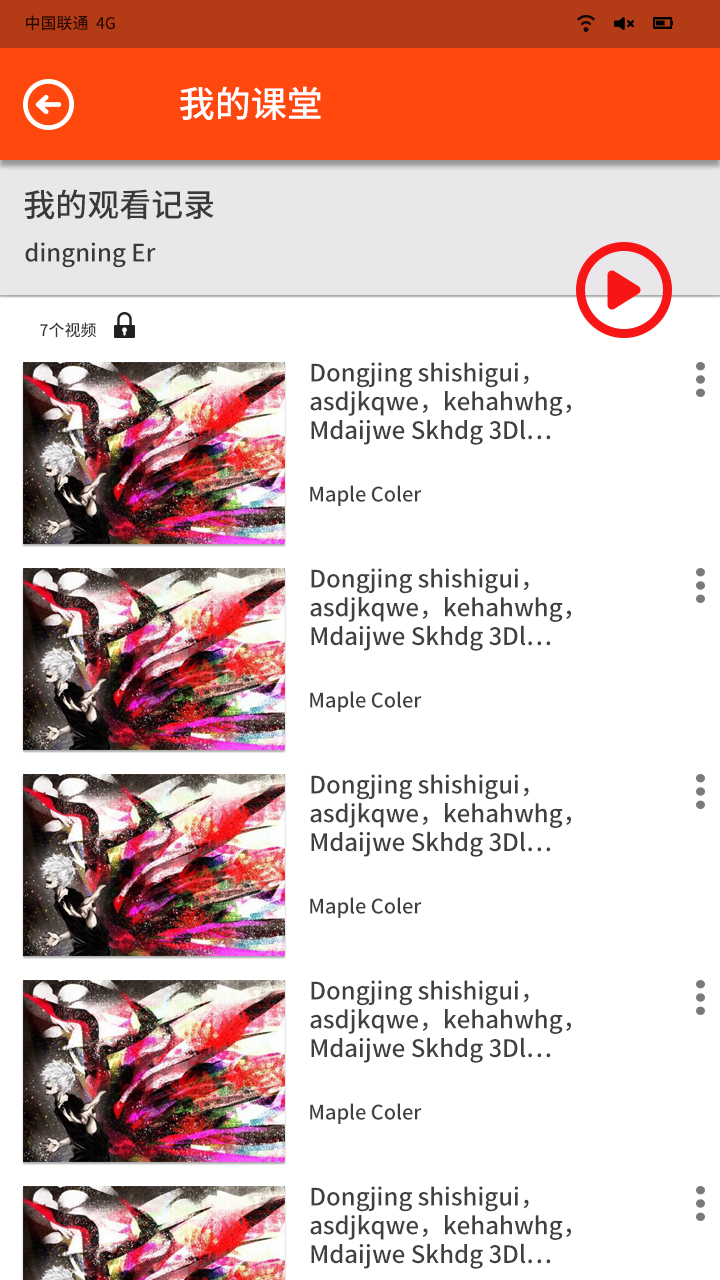
<style>
.page{position:relative;width:720px;height:1280px;background:#ffffff}
.page>*{position:absolute;margin:0}
.t1{font:16px "SourceHanSansCN-Medium";color:#2a0802}
.t2{font:36px "SourceHanSansCN-Medium";color:#ffffff}
.t3{font:32px "SourceHanSansCN-Medium";color:#3a393a}
.t4{font:24px "SourceHanSansCN-Medium";color:#3a393a}
.t5{font:16px "SourceHanSansCN-Medium";color:#373737}
.t6{font:24px "SourceHanSansCN-Medium";color:#404040}
.t7{font:20px "SourceHanSansCN-Medium";color:#404040}
</style>
<div class="page">
<p class="t1" style="left:26px;top:15px;width:89px;height:16px">中国联通  4G</p>
<p class="t2" style="left:180px;top:86px;width:141px;height:34px">我的课堂</p>
<p class="t3" style="left:24px;top:189px;width:190px;height:31px">我的观看记录</p>
<p class="t4" style="left:25px;top:242px;width:131px;height:26px">dingning Er</p>
<p class="t5" style="left:40px;top:322px;width:56px;height:16px">7个视频</p>
<p class="t6" style="left:310px;top:362px;width:261px;height:83px">Dongjing shishigui，<br>asdjkqwe，kehahwhg，<br>Mdaijwe Skhdg 3Dl…</p>
<p class="t7" style="left:310px;top:485px;width:112px;height:21px">Maple Coler</p>
<p class="t6" style="left:310px;top:568px;width:261px;height:83px">Dongjing shishigui，<br>asdjkqwe，kehahwhg，<br>Mdaijwe Skhdg 3Dl…</p>
<p class="t7" style="left:310px;top:691px;width:112px;height:21px">Maple Coler</p>
<p class="t6" style="left:310px;top:774px;width:261px;height:83px">Dongjing shishigui，<br>asdjkqwe，kehahwhg，<br>Mdaijwe Skhdg 3Dl…</p>
<p class="t7" style="left:310px;top:897px;width:112px;height:21px">Maple Coler</p>
<p class="t6" style="left:310px;top:980px;width:261px;height:83px">Dongjing shishigui，<br>asdjkqwe，kehahwhg，<br>Mdaijwe Skhdg 3Dl…</p>
<p class="t7" style="left:310px;top:1103px;width:112px;height:21px">Maple Coler</p>
<p class="t6" style="left:310px;top:1186px;width:261px;height:83px">Dongjing shishigui，<br>asdjkqwe，kehahwhg，<br>Mdaijwe Skhdg 3Dl…</p>
</div>
